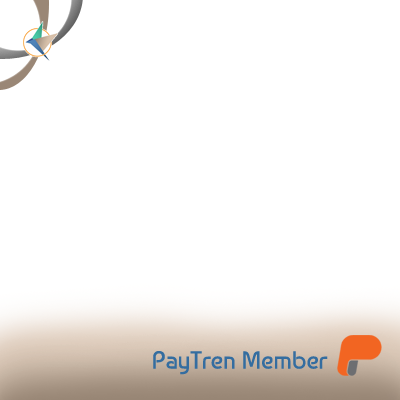
<style>
.page{position:relative;width:400px;height:400px;background:#ffffff}
.page>*{position:absolute;margin:0}
.t1{font:24.5px "Baumans-Regular";color:#346da0}
</style>
<div class="page">
<p class="t1" style="left:153px;top:351px;width:175px;height:24px">PayTren Member</p>
</div>
